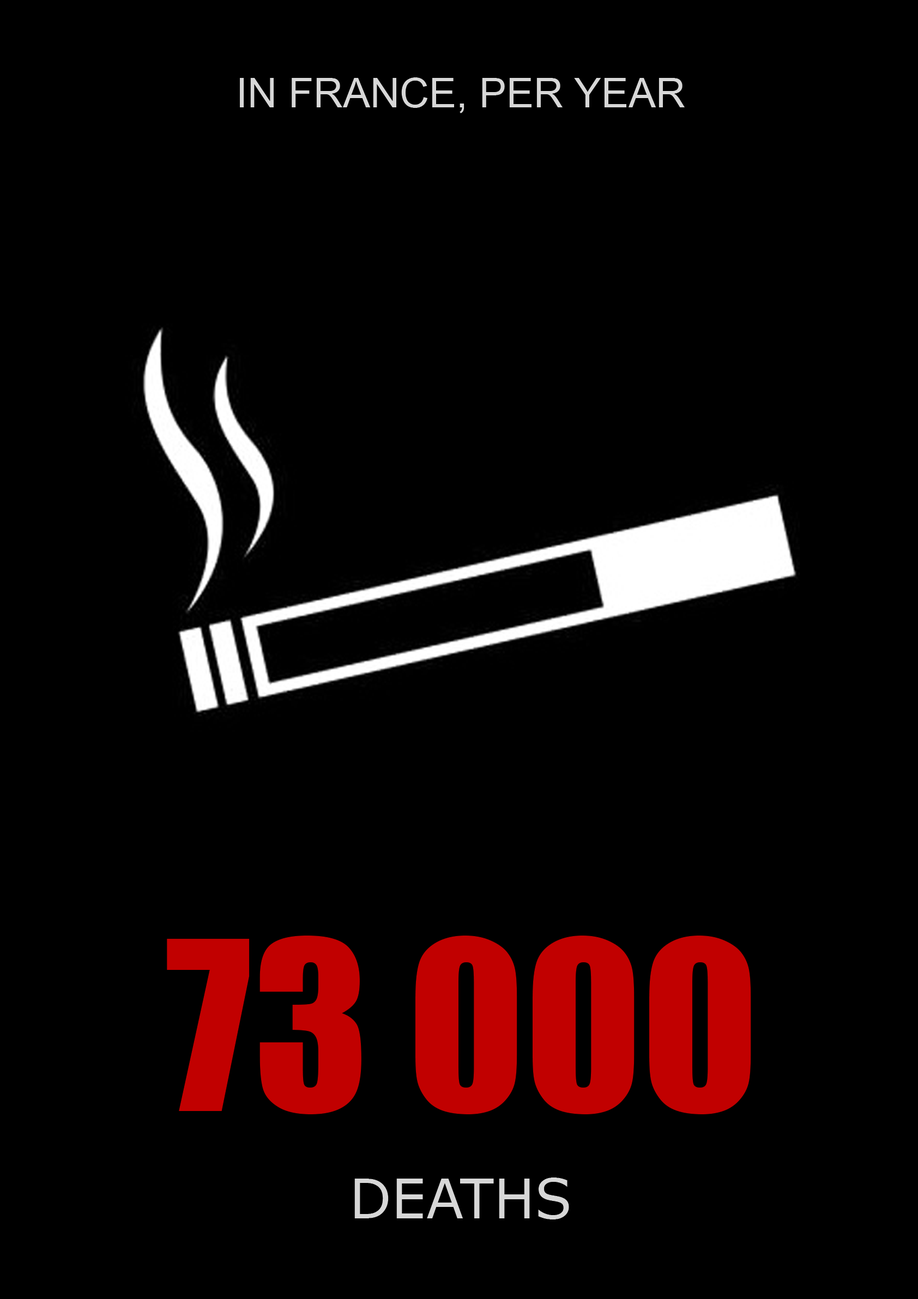
<style>
.page{position:relative;width:918px;height:1299px;background:#000000}
.page>*{position:absolute;margin:0}
.t1{font:40.9px "ArialMT";color:#d7d7d7}
.t2{font:218px "Impact";color:#c10000}
.t3{font:54.5px "Verdana";color:#d7d7d7}
</style>
<div class="page">
<p class="t1" style="left:240px;top:77px;width:445px;height:36px">IN FRANCE, PER YEAR</p>
<p class="t2" style="left:167px;top:935px;width:584px;height:180px">73 000</p>
<p class="t3" style="left:354px;top:1178px;width:215px;height:42px">DEATHS</p>
</div>
